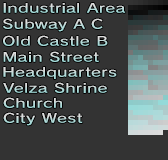
<style>
.page{position:relative;width:168px;height:160px;background:#333333}
.page>*{position:absolute;margin:0}
.t1{font:12.6px "RodinNTLGPro-DB";letter-spacing:0.01em;color:#badbda;scale:1.33 1}
.t2{font:12.6px "RodinNTLGPro-DB";letter-spacing:0.01em;scale:1.33 1}
.t3{font:12.6px "RodinNTLGPro-DB";letter-spacing:0.01em;color:#c1dbda;scale:1.33 1}
</style>
<div class="page">
<p class="t1" style="left:3px;top:3px;width:123px;height:10px">Industrial Area</p>
<p class="t2" style="left:3px;top:18px;width:100px;height:14px">Subway A C</p>
<p class="t2" style="left:3px;top:35px;width:105px;height:11px">Old Castle B</p>
<p class="t2" style="left:3px;top:51px;width:96px;height:11px">Main Street</p>
<p class="t3" style="left:3px;top:67px;width:114px;height:12px">Headquarters</p>
<p class="t2" style="left:3px;top:82px;width:104px;height:11px">Velza Shrine</p>
<p class="t2" style="left:3px;top:97px;width:59px;height:11px">Church</p>
<p class="t2" style="left:3px;top:112px;width:80px;height:14px">City West</p>
</div>
